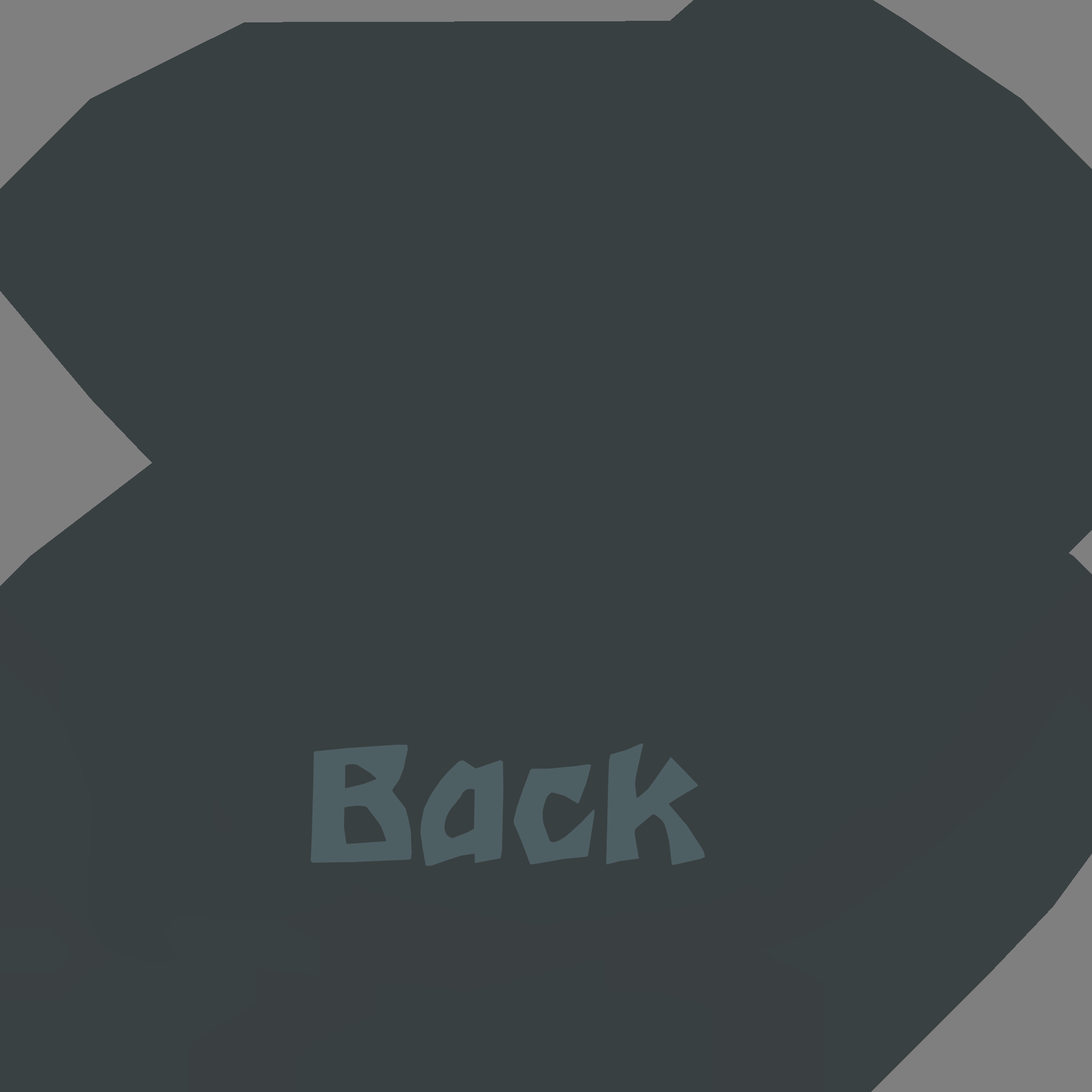
<style>
.page{position:relative;width:1092px;height:1092px;background:#394042}
.page>*{position:absolute;margin:0}
.t1{font:160px "Tarzan";color:#4e5f64}
</style>
<div class="page">
<p class="t1" style="left:310px;top:743px;width:395px;height:123px">Back</p>
</div>
